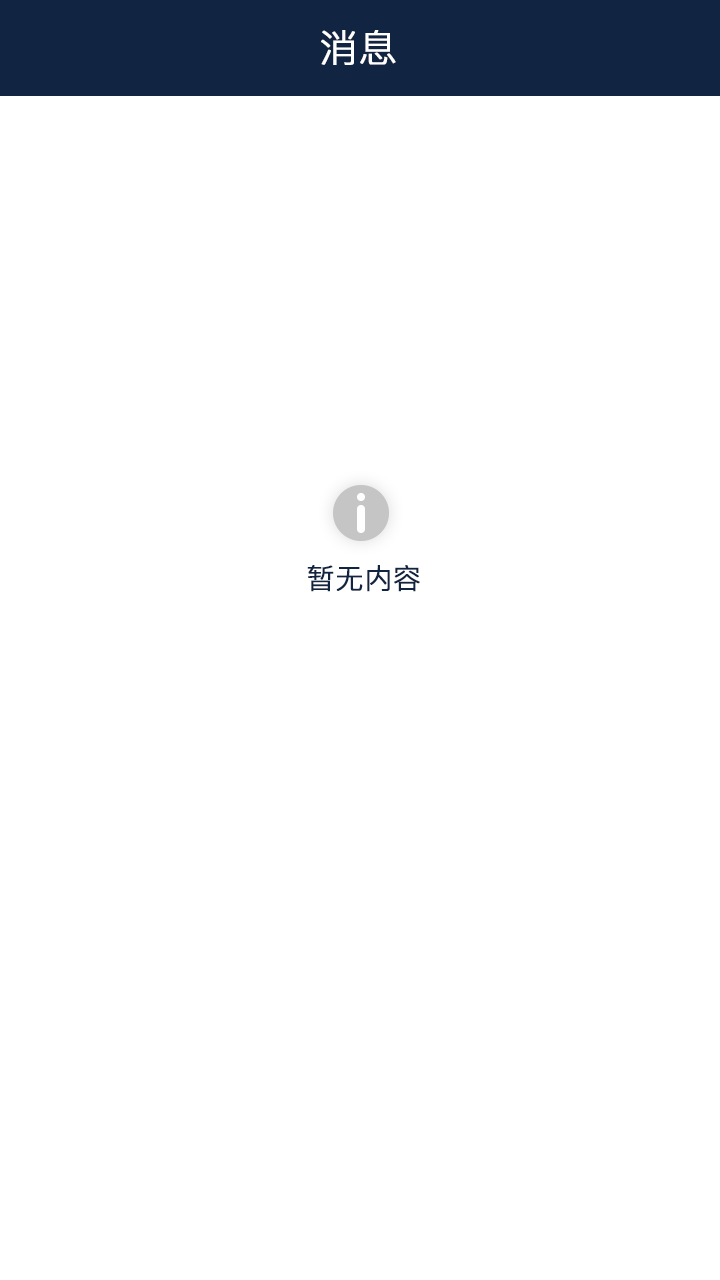
<style>
.page{position:relative;width:720px;height:1280px;background:#ffffff}
.page>*{position:absolute;margin:0}
.t1{font:38px "PingFang-SC-Regular";color:#ffffff;font-weight:bold}
.t2{font:28px "PingFang-SC-Regular";color:#112441;font-weight:bold}
</style>
<div class="page">
<p class="t1" style="left:321px;top:30px;width:75px;height:35px">消息</p>
<p class="t2" style="left:307px;top:565px;width:113px;height:27px">暂无内容</p>
</div>
